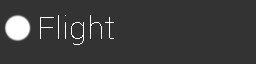
<style>
.page{position:relative;width:256px;height:64px;background:#333333}
.page>*{position:absolute;margin:0}
.t1{font:32px "Roboto-Thin";color:#ffffff}
</style>
<div class="page">
<p class="t1" style="left:40px;top:15px;width:74px;height:30px">Flight</p>
</div>
